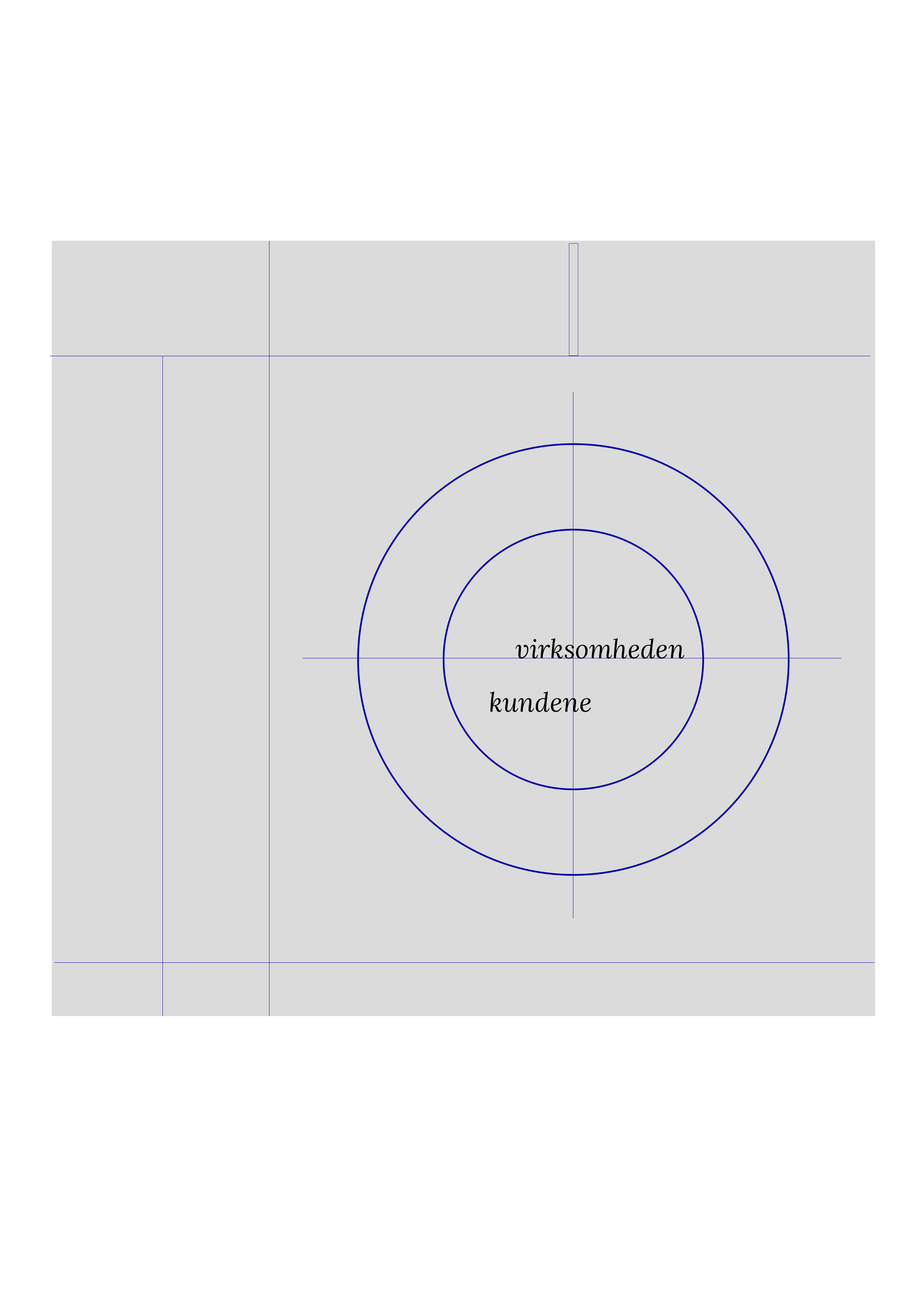
<style>
.page{position:relative;width:918px;height:1299px;background:#ffffff}
.page>*{position:absolute;margin:0}
.t1{font:26.7px "Lora-Italic";letter-spacing:0.01em;color:#010101}
</style>
<div class="page">
<p class="t1" style="left:515px;top:638px;width:170px;height:21px">virksomheden</p>
<p class="t1" style="left:490px;top:691px;width:101px;height:21px">kundene</p>
</div>
